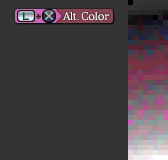
<style>
.page{position:relative;width:168px;height:160px;background:#333333}
.page>*{position:absolute;margin:0}
.t1{font:10.7px "MatissePro-M";color:#fefefe;scale:0.9 1}
.t2{font:10.7px "MatissePro-M";color:#fefefe}
</style>
<div class="page">
<p class="t1" style="left:63px;top:11px;width:47px;height:10px">Alt. C<span class="t2">olor</span></p>
</div>
